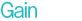
<style>
.page{position:relative;width:82px;height:21px;background:#ffffff}
.page>*{position:absolute;margin:0}
.t1{font:20px "GothicMB101Pro-Regular";letter-spacing:-0.06em;color:#1dbcc0;scale:0.9 1}
</style>
<div class="page">
<p class="t1" style="left:1px;top:1px;width:36px;height:17px">Gain</p>
</div>
